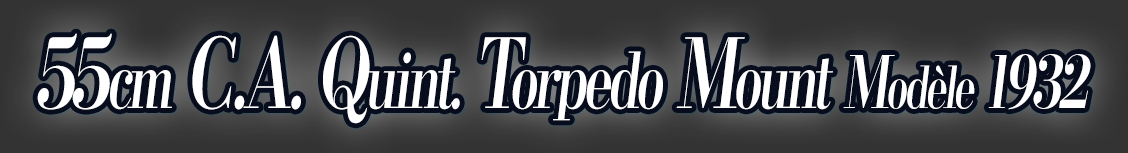
<style>
.page{position:relative;width:1128px;height:153px}
.page>*{position:absolute;margin:0}
.t1{font:96px "KochoStd-Heavy";letter-spacing:-0.08em;color:#ffffff;font-style:italic;scale:0.68 1}
.t2{font:76.8px "KochoStd-Heavy";letter-spacing:-0.08em;color:#ffffff;font-style:italic;scale:0.68 1}
.t3{font:72px "KochoStd-Heavy";letter-spacing:-0.08em;color:#ffffff;font-style:italic;scale:0.68 1}
.t4{font:57.6px "KochoStd-Heavy";letter-spacing:-0.08em;color:#ffffff;font-style:italic;scale:0.68 1}
</style>
<div class="page">
<p class="t1" style="left:37px;top:33px;width:1054px;height:91px">55<span class="t2">cm</span> C.A. Q<span class="t2">uint.</span> T<span class="t2">orpedo</span> M<span class="t2">ount </span><span class="t3">M</span><span class="t4">odèle </span><span class="t3">1932</span></p>
</div>
